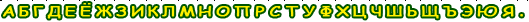
<style>
.page{position:relative;width:529px;height:22px;background:#ffffff}
.page>*{position:absolute;margin:0}
.t1{font:13.4px "ComicSansMS";letter-spacing:0.255em;color:#fff000;font-weight:bold;scale:1.32 1}
.t2{font:13.4px "ComicSansMS";letter-spacing:0.165em;color:#fff000;font-weight:bold;scale:1.32 1}
.t3{font:13.4px "ComicSansMS";letter-spacing:0.185em;color:#fff000;font-weight:bold;scale:1.32 1}
.t4{font:13.4px "ComicSansMS";letter-spacing:0.205em;color:#fff000;font-weight:bold;scale:1.32 1}
.t5{font:13.4px "ComicSansMS";letter-spacing:0.275em;color:#fff000;font-weight:bold;scale:1.32 1}
.t6{font:13.4px "ComicSansMS";letter-spacing:0.225em;color:#fff000;font-weight:bold;scale:1.32 1}
.t7{font:13.4px "ComicSansMS";letter-spacing:0.135em;color:#fff000;font-weight:bold;scale:1.32 1}
.t8{font:13.4px "ComicSansMS";letter-spacing:0.155em;color:#fff000;font-weight:bold;scale:1.32 1}
.t9{font:13.4px "ComicSansMS";letter-spacing:0.345em;color:#fff000;font-weight:bold;scale:1.32 1}
.t10{font:13.4px "ComicSansMS";letter-spacing:0.245em;color:#fff000;font-weight:bold;scale:1.32 1}
.t11{font:13.4px "ComicSansMS";letter-spacing:0.175em;color:#fff000;font-weight:bold;scale:1.32 1}
.t12{font:13.4px "ComicSansMS";letter-spacing:0.215em;color:#fff000;font-weight:bold;scale:1.32 1}
.t13{font:13.4px "ComicSansMS";letter-spacing:0.235em;color:#fff000;font-weight:bold;scale:1.32 1}
</style>
<div class="page">
<p class="t1" style="left:3px;top:3px;width:520px;height:16px"><span class="t2">АБ</span><span class="t3">ГД</span><span class="t4">Е</span><span class="t5">Ё</span><span class="t6">ЖЗ</span><span class="t7">И</span><span class="t3">КЛ</span><span class="t8">М</span><span class="t4">НО</span>ПРС<span class="t9">Т</span><span class="t10">УФ</span><span class="t11">Х</span><span class="t6">ЦЧ</span><span class="t12">ШЬ</span><span class="t13">ЩЪ</span><span class="t12">Э</span><span class="t5">ЮЯ</span><span class="t12">.</span></p>
</div>
